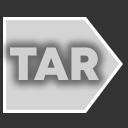
<style>
.page{position:relative;width:128px;height:128px;background:#333333}
.page>*{position:absolute;margin:0}
.t1{font:46.3px "Mont-HeavyDEMO";color:#cfcfcf}
</style>
<div class="page">
<p class="t1" style="left:10px;top:47px;width:89px;height:33px;opacity:0.8">TAR</p>
</div>
